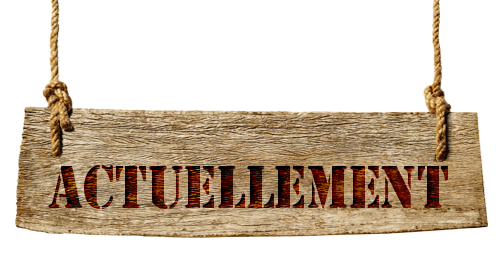
<style>
.page{position:relative;width:500px;height:270px;background:#ffffff}
.page>*{position:absolute;margin:0}
.t1{font:56px "StencilStd";scale:0.87 1}
</style>
<div class="page">
<p class="t1" style="left:48px;top:165px;width:400px;height:44px">actuellement</p>
</div>
